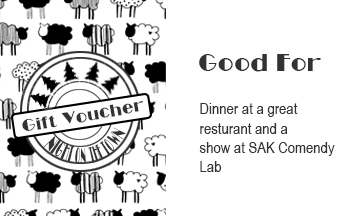
<style>
.page{position:relative;width:360px;height:216px;background:#ffffff}
.page>*{position:absolute;margin:0}
.t1{font:27px "Miami";color:#333333}
.t2{font:19.5px "Miami";color:#333333}
.t3{font:16px "ArialNarrow";color:#333333}
.t4{font:14px "Miami";color:#333333;scale:0.5 1}
</style>
<div class="page">
<p class="t1" style="left:199px;top:54px;width:122px;height:18px">Good For</p>
<p class="t2" style="left:22px;top:101px;width:121px;height:30px;rotate:-10deg">Gift Voucher</p>
<p class="t3" style="left:199px;top:103px;width:136px;height:69px">Dinner at a great<br>resturant and a <br>show at SAK Comendy<br>Lab</p>
<p class="t4" style="left:43px;top:127px;width:83px;height:37px;rotate:-11deg">NIGHT ON  THE TOWN</p>
</div>
